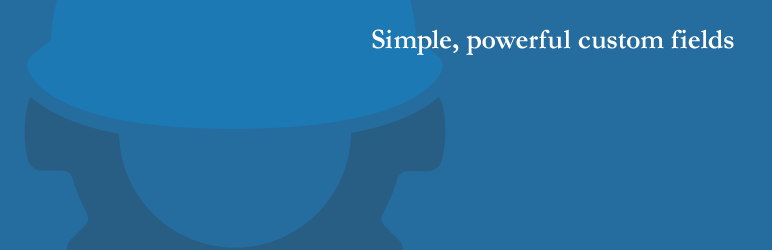
<style>
.page{position:relative;width:772px;height:250px;background:#256c9f}
.page>*{position:absolute;margin:0}
.t1{font:28px "Garamond-Bold";color:#ffffff}
</style>
<div class="page">
<p class="t1" style="left:372px;top:29px;width:362px;height:26px">Simple, powerful custom fields</p>
</div>
